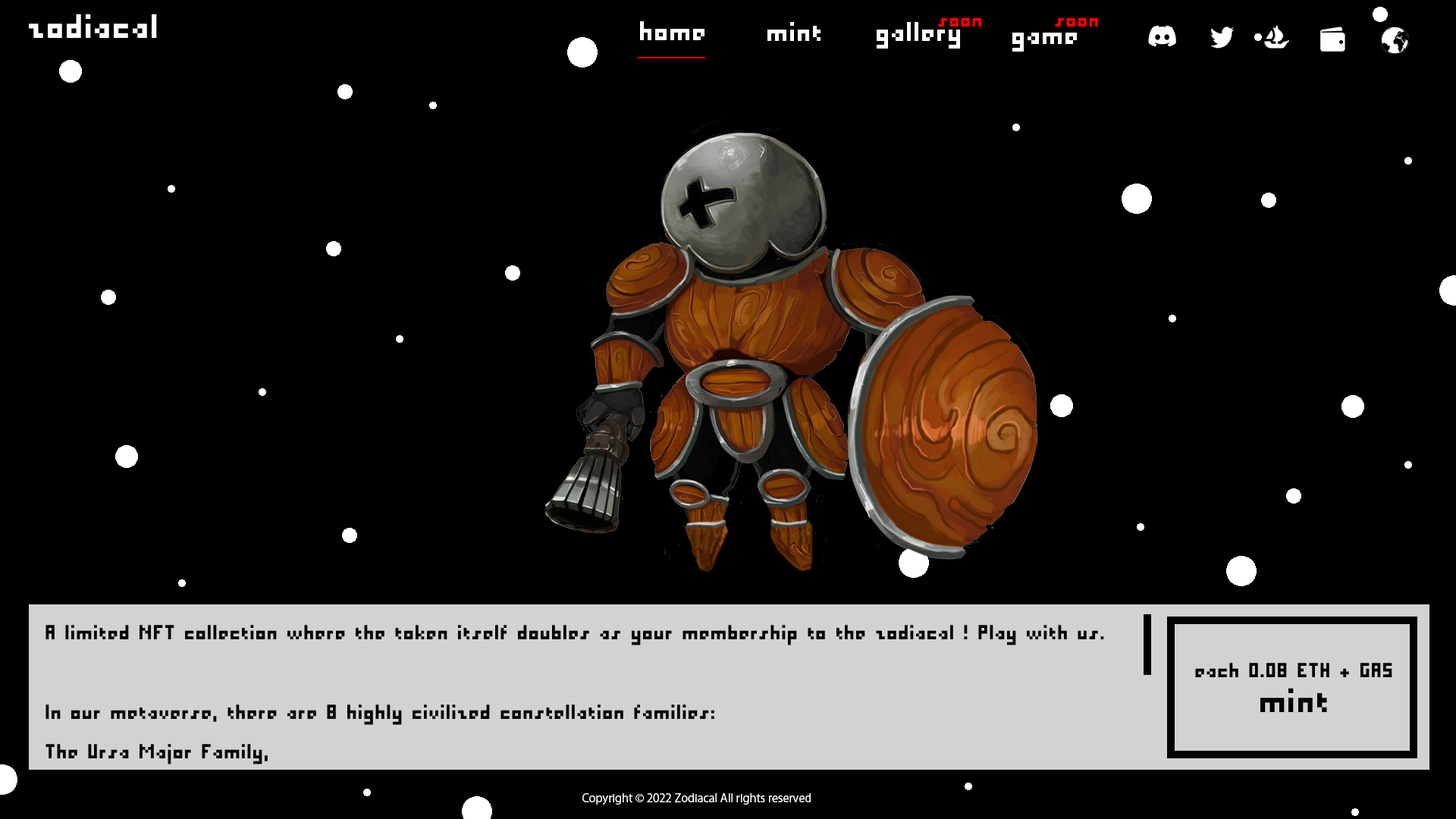
<style>
.page{position:relative;width:1456px;height:819px;background:#000000}
.page>*{position:absolute;margin:0}
.t1{font:37.9px "PixelMillennium";color:#ffffff}
.t2{font:22.7px "PixelMillennium";color:#ff0000}
.t3{font:30.3px "PixelMillennium";color:#ffffff}
.t4{font:22.7px "PixelMillennium";color:#000000}
.t5{font:37.9px "PixelMillennium";color:#000000}
.t6{font:11.4px "KozGoPr6N-Regular";color:#ffffff}
</style>
<div class="page">
<p class="t1" style="left:29px;top:14px;width:128px;height:24px">zodiacal</p>
<p class="t2" style="left:938px;top:17px;width:43px;height:10px">soon</p>
<p class="t2" style="left:1055px;top:17px;width:43px;height:10px">soon</p>
<p class="t3" style="left:640px;top:21px;width:64px;height:19px">home</p>
<p class="t3" style="left:767px;top:22px;width:54px;height:19px">mint</p>
<p class="t3" style="left:877px;top:22px;width:83px;height:27px">gallery</p>
<p class="t3" style="left:1012px;top:33px;width:65px;height:19px">game</p>
<p class="t4" style="left:1195px;top:663px;width:197px;height:14px">each 0.08 ETH + GAS</p>
<p class="t5" style="left:1260px;top:688px;width:67px;height:24px">mint</p>
<p class="t6" style="left:582px;top:793px;width:229px;height:12px">Copyright © 2022 Zodiacal All rights reserved</p>
</div>
